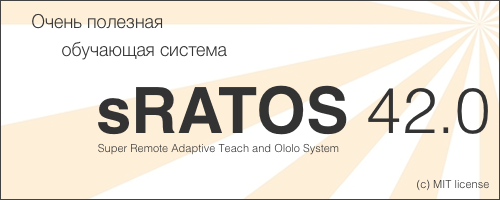
<style>
.page{position:relative;width:500px;height:200px;background:#feefd9}
.page>*{position:absolute;margin:0}
.t1{font:18px/28px "Helvetica-Light";color:#333333}
.t2{font:63.8px "Helvetica-Bold";color:#333333}
.t3{font:63.8px "Helvetica-Light";color:#333333}
.t4{font:11px "Helvetica-Light"}
.t5{font:11px "Helvetica-Light";color:#333333}
</style>
<div class="page">
<p class="t1" style="left:32px;top:13px;width:195px;height:47px">Очень полезная<br>      обучающая система</p>
<p class="t2" style="left:98px;top:85px;width:390px;height:50px">sRATOS <span class="t3">42.0</span></p>
<p class="t4" style="left:98px;top:143px;width:241px;height:12px">Super Remote Adaptive Teach and Ololo System</p>
<p class="t5" style="left:417px;top:179px;width:72px;height:12px">(c) MIT license</p>
</div>
